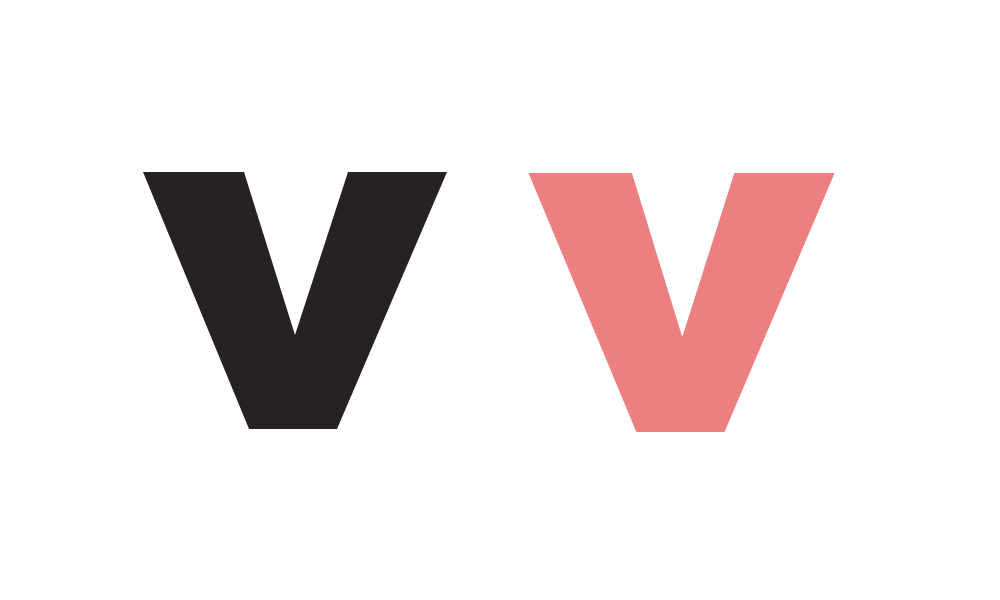
<style>
.page{position:relative;width:1000px;height:600px;background:#ffffff}
.page>*{position:absolute;margin:0}
.t1{font:500px "Arial-Black";color:#ec7f7f}
</style>
<div class="page">
<p class="t1" style="left:528px;top:173px;width:307px;height:259px">v</p>
</div>
